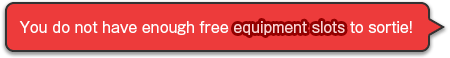
<style>
.page{position:relative;width:450px;height:58px;background:#ed3b3b}
.page>*{position:absolute;margin:0}
.t1{font:14px "GothicMB101Pro-Regular";color:#ffffff}
.t2{font:14px "GothicMB101Pro-Regular";color:#ffd3d3}
</style>
<div class="page">
<p class="t1" style="left:19px;top:21px;width:393px;height:14px">You do not have enough free <span class="t2">equipment slots</span> to sortie!</p>
<p class="t1" style="left:19px;top:21px;width:393px;height:14px">You do not have enough free <span class="t2">equipment slots</span> to sortie!</p>
</div>
